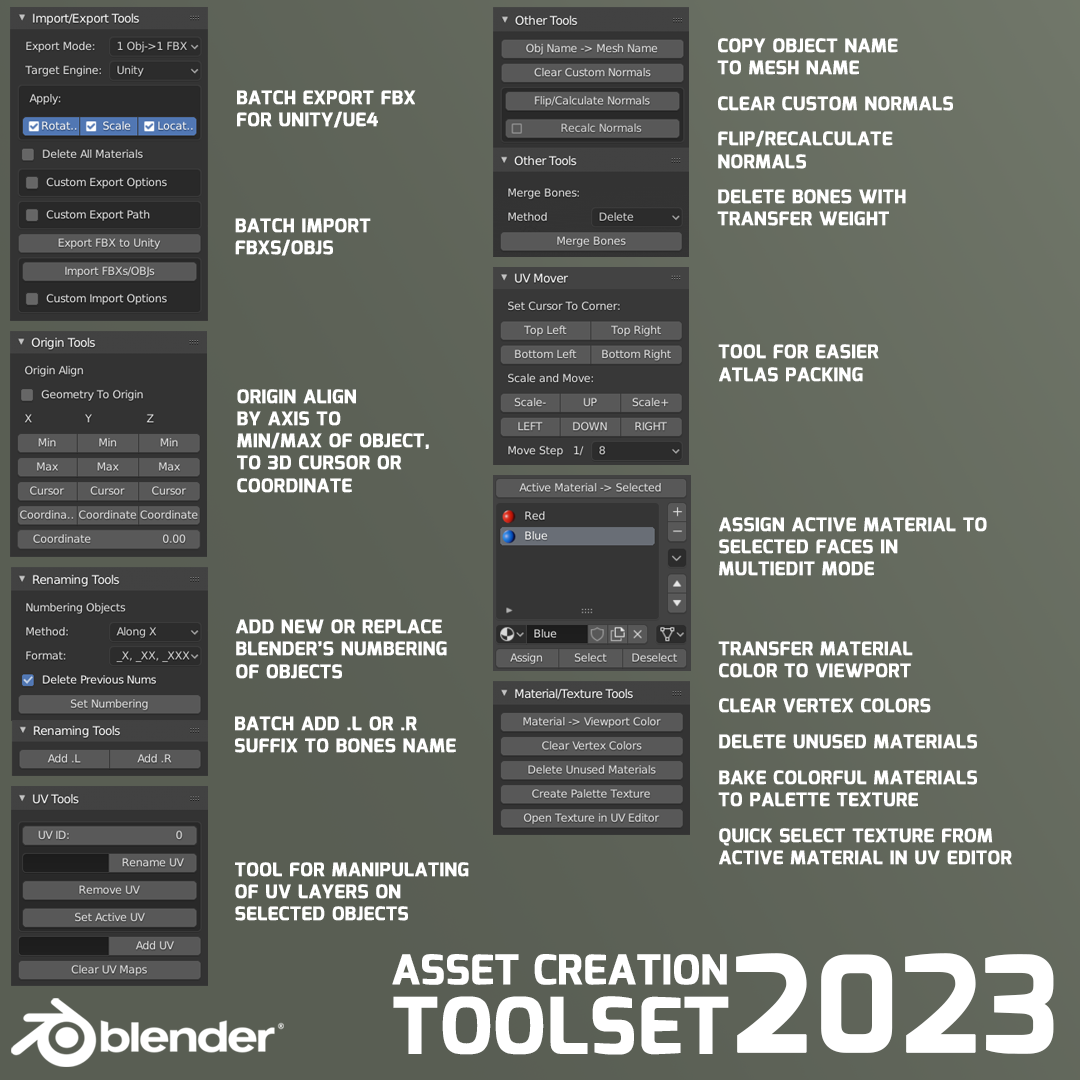
<style>
.page{position:relative;width:1080px;height:1080px}
.page>*{position:absolute;margin:0}
.t1{font:18.6px "Mina-Bold";color:#ffffff;text-transform:uppercase;font-weight:bold}
.t2{font:132.5px "Mina-Bold";color:#ffffff;text-transform:uppercase;font-weight:bold}
.t3{font:40.4px "Mina-Bold";color:#ffffff;text-transform:uppercase;font-weight:bold}
.t4{font:76.7px "Mina-Bold";color:#ffffff;text-transform:uppercase;font-weight:bold}
</style>
<div class="page">
<p class="t1" style="left:717px;top:38px;width:181px;height:37px">copy object name<br>to mesh name</p>
<p class="t1" style="left:237px;top:90px;width:179px;height:38px">batch export FBX<br>for unity/ue4</p>
<p class="t1" style="left:718px;top:96px;width:235px;height:15px">Clear custom normals</p>
<p class="t1" style="left:718px;top:130px;width:175px;height:39px">Flip/recalculate <br>normals</p>
<p class="t1" style="left:717px;top:189px;width:189px;height:37px">Delete bones with<br>transfer weight</p>
<p class="t1" style="left:235px;top:218px;width:136px;height:38px">BATCH IMPort<br>fbxs/objs</p>
<p class="t1" style="left:718px;top:344px;width:161px;height:38px">Tool for easier <br>Atlas Packing</p>
<p class="t1" style="left:237px;top:389px;width:192px;height:104px">ORigin Align <br>by axis to<br>min/max of object,<br>to 3d cursor or<br>Coordinate</p>
<p class="t1" style="left:719px;top:517px;width:268px;height:59px">Assign active material to <br>selected faces in <br>MultiEdit Mode</p>
<p class="t1" style="left:236px;top:619px;width:211px;height:60px">Add new or Replace<br>blender’s numbering<br>of objects</p>
<p class="t1" style="left:718px;top:641px;width:195px;height:37px">Transfer Material <br>Color to Viewport</p>
<p class="t1" style="left:719px;top:698px;width:212px;height:15px">Clear Vertex colors</p>
<p class="t1" style="left:235px;top:716px;width:221px;height:37px">batch add .l or .r <br>suffix to bones name</p>
<p class="t1" style="left:719px;top:734px;width:258px;height:15px">Delete unused materials</p>
<p class="t1" style="left:718px;top:770px;width:259px;height:37px">bake colorful materials <br>to palette Texture</p>
<p class="t1" style="left:719px;top:828px;width:293px;height:37px">Quick Select Texture from <br>Active material in UV Editor</p>
<p class="t1" style="left:235px;top:862px;width:234px;height:59px">Tool for manipulating<br>of uv layers on<br>selected objects</p>
<p class="t2" style="left:736px;top:953px;width:318px;height:101px">2023</p>
<p class="t3" style="left:392px;top:954px;width:335px;height:31px">ASset creation</p>
<p class="t4" style="left:393px;top:996px;width:336px;height:59px">Toolset</p>
</div>
